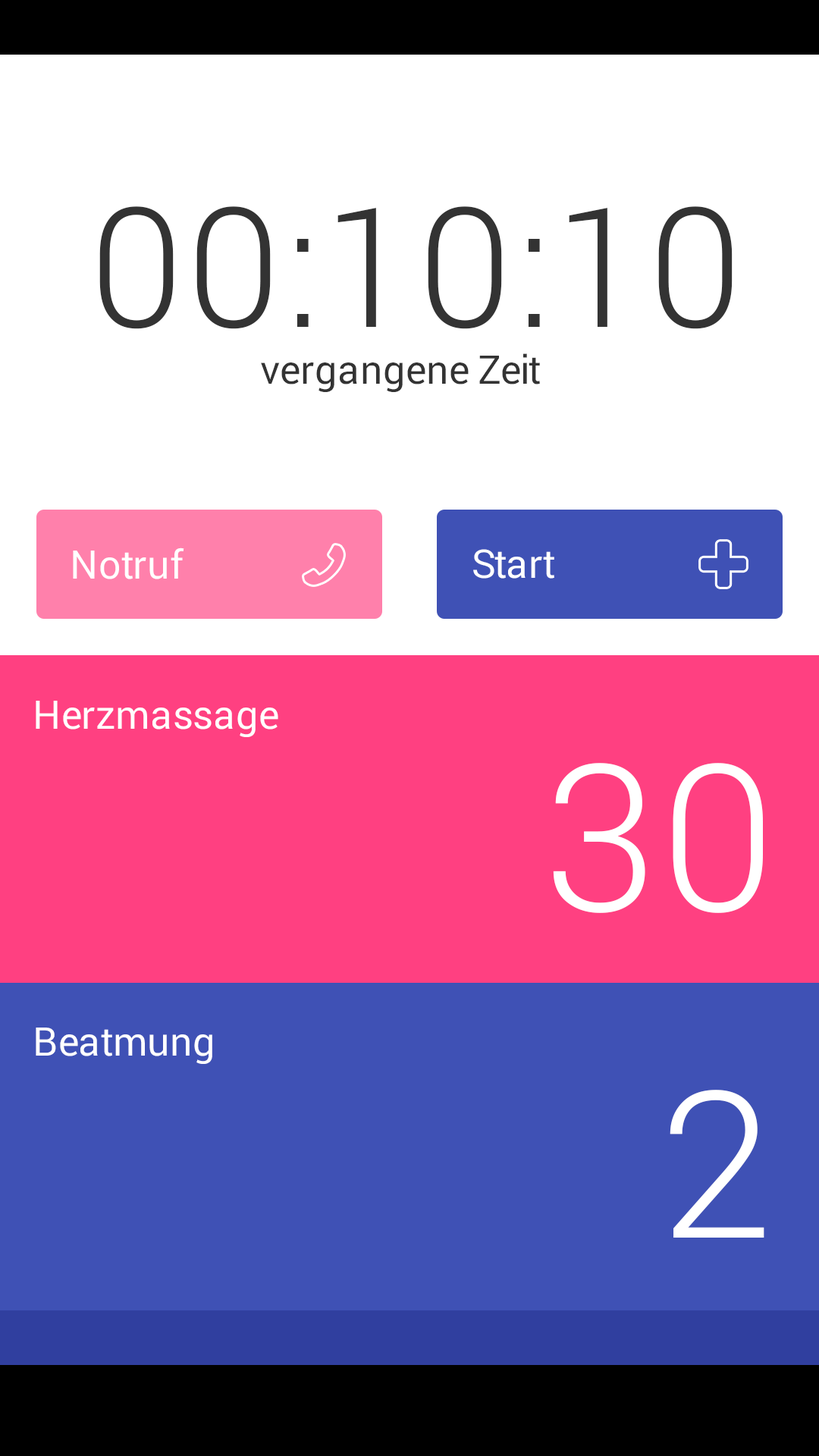
<style>
.page{position:relative;width:819px;height:1456px;background:#ffffff}
.page>*{position:absolute;margin:0}
.t1{font:166.8px "Roboto-Light";color:#333333;text-transform:uppercase}
.t2{font:39.4px "Roboto-Regular";color:#333333}
.t3{font:39.4px "Roboto-Regular";color:#ffffff}
.t4{font:204.7px "Roboto-Light";color:#ffffff}
</style>
<div class="page">
<p class="t1" style="left:99px;top:206px;width:634px;height:123px">00:10:10</p>
<p class="t2" style="left:261px;top:353px;width:279px;height:39px">vergangene Zeit</p>
<p class="t3" style="left:73px;top:548px;width:111px;height:31px">Notruf</p>
<p class="t3" style="left:473px;top:549px;width:81px;height:30px">Start</p>
<p class="t3" style="left:36px;top:701px;width:242px;height:36px">Herzmassage</p>
<p class="t4" style="left:553px;top:763px;width:210px;height:150px">30</p>
<p class="t3" style="left:36px;top:1028px;width:176px;height:36px">Beatmung</p>
<p class="t4" style="left:670px;top:1090px;width:94px;height:148px">2</p>
</div>
